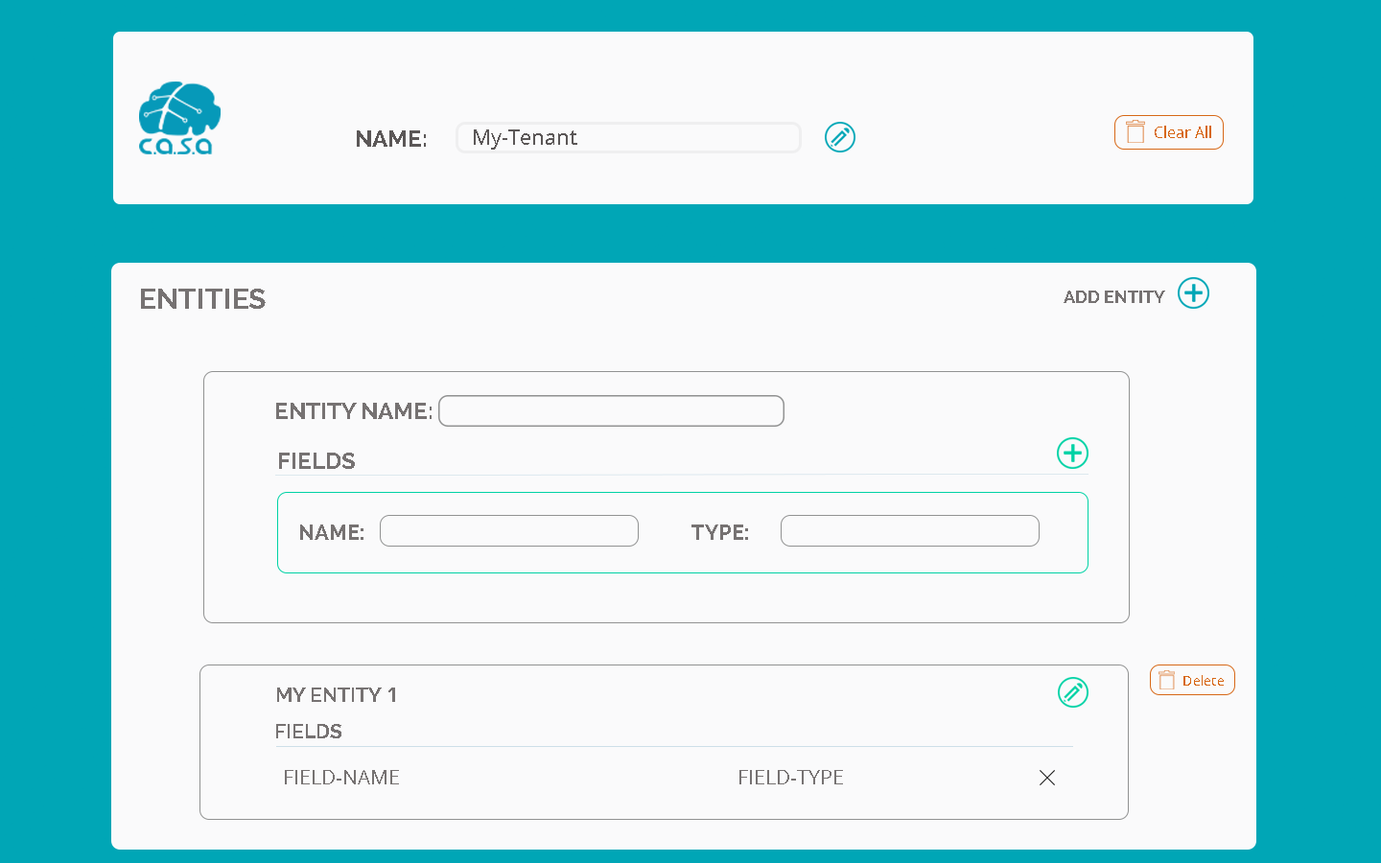
<style>
.page{position:relative;width:1381px;height:863px;background:#fafafb}
.page>*{position:absolute;margin:0}
.t1{font:15.3px "OpenSans";color:#d76817}
.t2{font:23px "Raleway-Bold";color:#5b5757}
.t3{font:21.1px "OpenSans";color:#5b5757}
.t4{font:28.8px "Raleway-Bold";color:#757272}
.t5{font:17.3px "Raleway-Bold";color:#757272}
.t6{font:23px "Raleway-Bold";color:#757272}
.t7{font:21.1px "Raleway-Bold";color:#757272}
.t8{font:13.3px "OpenSans";color:#d76817}
.t9{font:20.1px "Raleway-Bold";color:#767272}
.t10{font:20.1px "OpenSans-Bold";color:#767272}
.t11{font:20.1px "OpenSans";color:#767272}
</style>
<div class="page">
<p class="t1" style="left:1155px;top:126px;width:56px;height:12px">Clear All</p>
<p class="t2" style="left:357px;top:130px;width:69px;height:17px">NAME:</p>
<p class="t3" style="left:474px;top:129px;width:103px;height:21px">My-Tenant</p>
<p class="t4" style="left:141px;top:289px;width:125px;height:20px">ENTITIES</p>
<p class="t5" style="left:1064px;top:291px;width:101px;height:12px">ADD ENTITY</p>
<p class="t6" style="left:276px;top:403px;width:156px;height:16px">ENTITY NAME:</p>
<p class="t6" style="left:279px;top:453px;width:76px;height:16px">FIELDS</p>
<p class="t7" style="left:300px;top:525px;width:64px;height:15px">NAME:</p>
<p class="t7" style="left:692px;top:525px;width:56px;height:15px">TYPE:</p>
<p class="t8" style="left:1184px;top:675px;width:40px;height:11px">Delete</p>
<p class="t9" style="left:277px;top:688px;width:118px;height:14px">MY ENTITY <span class="t10">1</span></p>
<p class="t9" style="left:276px;top:724px;width:65px;height:15px">FIELDS</p>
<p class="t11" style="left:285px;top:770px;width:114px;height:15px">FIELD-NAME</p>
<p class="t11" style="left:740px;top:770px;width:103px;height:15px">FIELD-TYPE</p>
</div>
